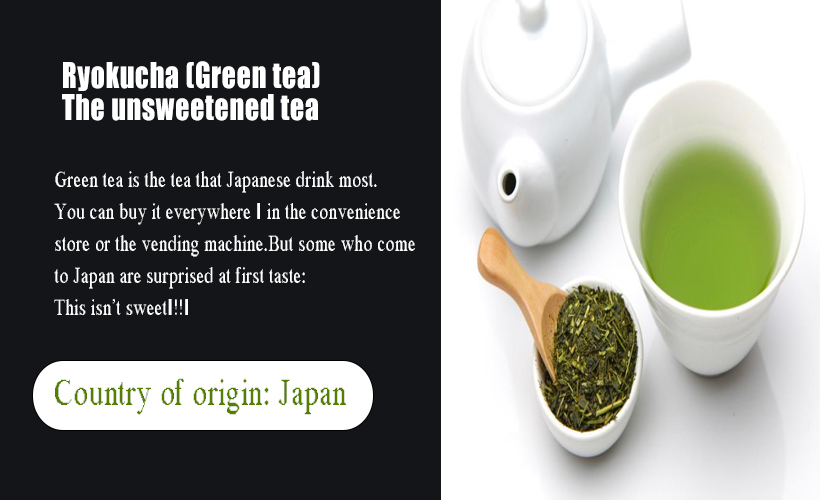
<style>
.page{position:relative;width:820px;height:500px;background:#141518}
.page>*{position:absolute;margin:0}
.t1{font:33px/16px "Impact";letter-spacing:0.025em;color:#ffffff;scale:0.85 1}
.t2{font:22.3px/16px "MS Serif";letter-spacing:0.025em;color:#ffffff;scale:0.76 1}
.t3{font:36.7px "MS Serif";letter-spacing:0.025em;color:#567e00;scale:0.76 1}
</style>
<div class="page">
<p class="t1" style="left:62px;top:61px;width:258px;height:60px">Ryokucha (Green tea) <br><br>The unsweetened tea</p>
<p class="t2" style="left:54px;top:171px;width:361px;height:144px">Green tea is the tea that Japanese drink most.<br><br>You can buy it everywhere – in the convenience <br><br>store or the vending machine.But some who come <br><br>to Japan are surprised at first taste:<br><br>This isn’t sweet…!!”</p>
<p class="t3" style="left:55px;top:378px;width:291px;height:37px">Country of origin: Japan</p>
</div>
